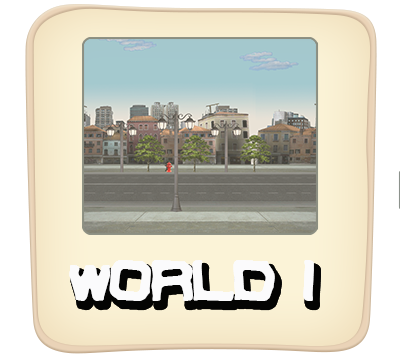
<style>
.page{position:relative;width:400px;height:360px}
.page>*{position:absolute;margin:0}
.t1{font:60px "VindictiveBRK";letter-spacing:-0.02em;color:#fbfbfc}
</style>
<div class="page">
<p class="t1" style="left:69px;top:260px;width:245px;height:41px">wORLD 1</p>
<p class="t1" style="left:69px;top:260px;width:245px;height:41px">wORLD 1</p>
<p class="t1" style="left:69px;top:260px;width:245px;height:41px">wORLD 1</p>
</div>
